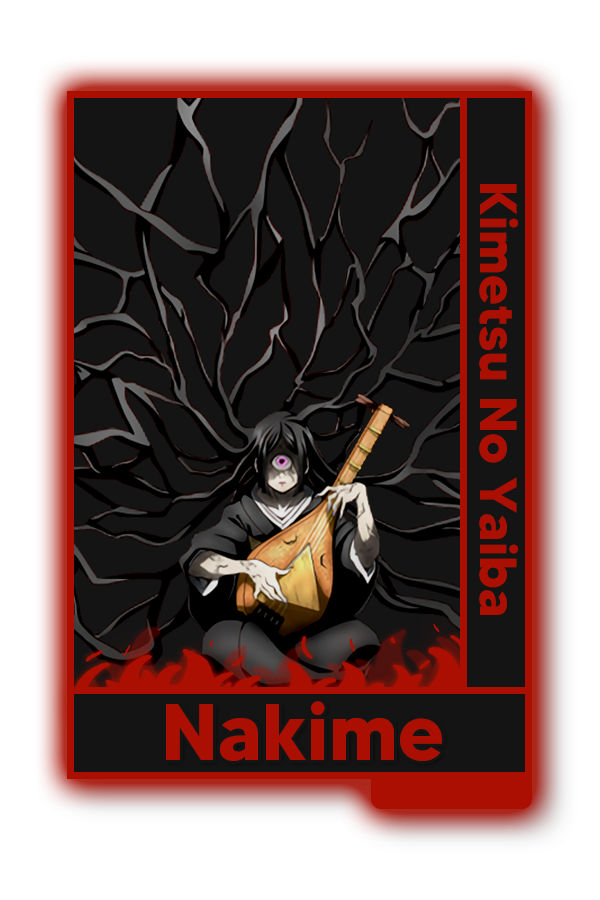
<style>
.page{position:relative;width:600px;height:900px;background:#141414}
.page>*{position:absolute;margin:0}
.t1{font:52px "MADETOMMY-Bold";color:#ab0f01}
.t2{font:79.9px "MADETOMMY-Bold";color:#ab0f01}
</style>
<div class="page">
<p class="t1" style="left:479px;top:184px;width:40px;height:431px;rotate:90deg">Kimetsu No Yaiba</p>
<p class="t2" style="left:166px;top:701px;width:276px;height:60px">Nakime</p>
</div>
